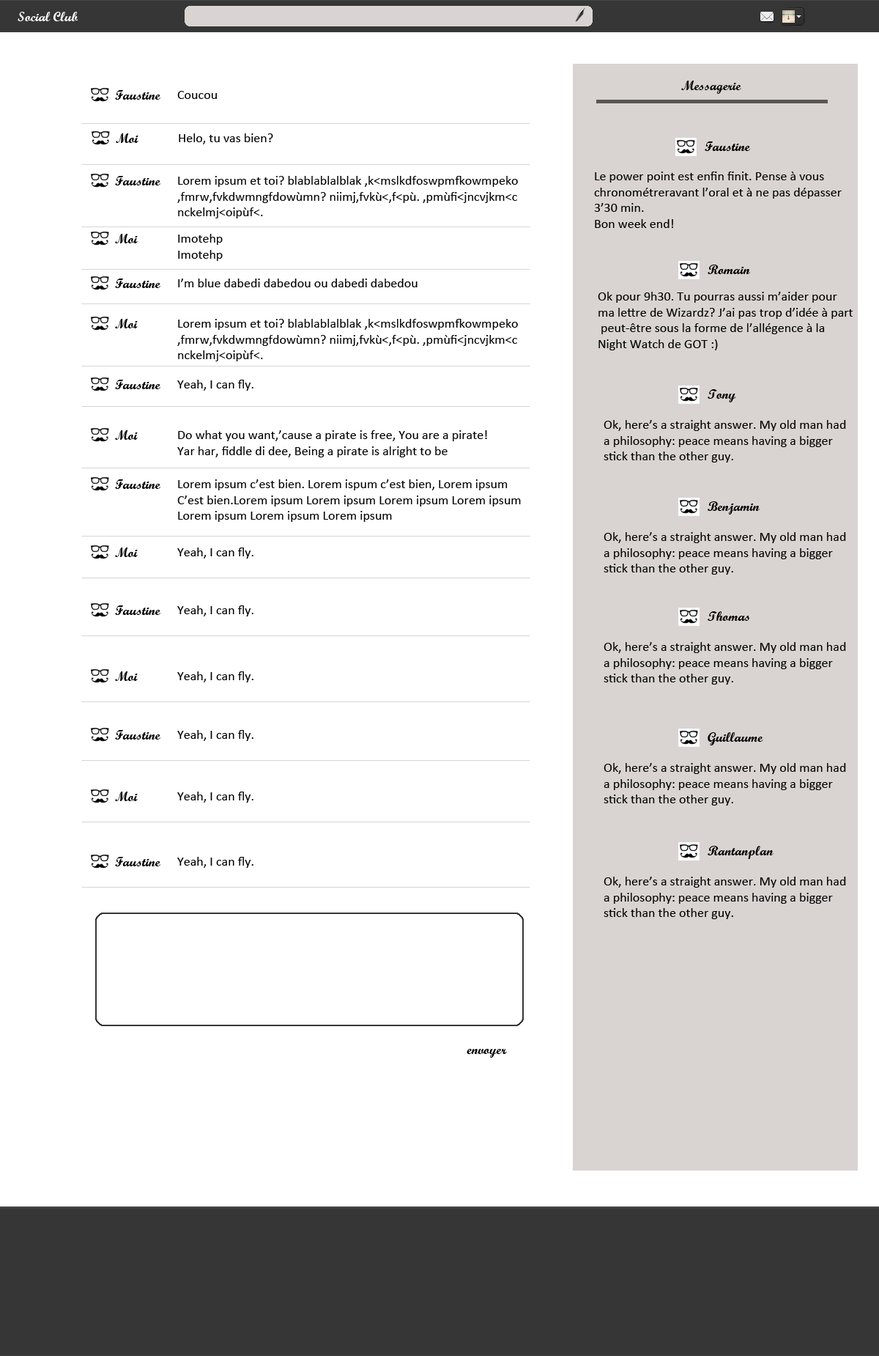
<style>
.page{position:relative;width:879px;height:1356px;background:#ffffff}
.page>*{position:absolute;margin:0}
.t1{font:13.2px "ScriptMTBold";color:#fefefe}
.t2{font:13.2px "ScriptMTBold";color:#070707}
.t3{font:13.2px "ScriptMTBold";color:#010101}
.t4{font:13.2px "Calibri";color:#010101}
</style>
<div class="page">
<p class="t1" style="left:18px;top:12px;width:60px;height:9px">Social Club</p>
<p class="t2" style="left:682px;top:81px;width:60px;height:13px">Messagerie</p>
<p class="t3" style="left:115px;top:90px;width:46px;height:10px">Faustine</p>
<p class="t4" style="left:177px;top:91px;width:40px;height:8px">Coucou</p>
<p class="t3" style="left:116px;top:133px;width:23px;height:10px">Moi</p>
<p class="t4" style="left:179px;top:133px;width:94px;height:11px">Helo, tu vas bien?</p>
<p class="t3" style="left:705px;top:141px;width:45px;height:10px">Faustine</p>
<p class="t4" style="left:594px;top:171px;width:248px;height:57px">Le power point est enfin finit. Pense à vous <br>chronométreravant l’oral et à ne pas dépasser <br>3’30 min.<br>Bon week end!</p>
<p class="t3" style="left:115px;top:176px;width:46px;height:9px">Faustine</p>
<p class="t4" style="left:177px;top:176px;width:341px;height:42px">Lorem ipsum et toi? blablablalblak ,k&lt;mslkdfoswpmfkowmpeko<br>,fmrw,fvkdwmngfdowùmn? niimj,fvkù&lt;,f&lt;pù. ,pmùfi&lt;jncvjkm&lt;c<br>nckelmj&lt;oipùf&lt;.</p>
<p class="t3" style="left:115px;top:234px;width:23px;height:9px">Moi</p>
<p class="t4" style="left:178px;top:234px;width:45px;height:27px">Imotehp <br>Imotehp</p>
<p class="t3" style="left:708px;top:265px;width:42px;height:9px">Romain</p>
<p class="t3" style="left:115px;top:278px;width:46px;height:10px">Faustine</p>
<p class="t4" style="left:178px;top:278px;width:240px;height:9px">I’m blue dabedi dabedou ou dabedi dabedou</p>
<p class="t4" style="left:598px;top:292px;width:255px;height:58px">Ok pour 9h30. Tu pourras aussi m’aider pour <br>ma lettre de Wizardz? J’ai pas trop d’idée à part<br> peut-être sous la forme de l’allégence à la <br>Night Watch de GOT :)</p>
<p class="t3" style="left:115px;top:319px;width:23px;height:9px">Moi</p>
<p class="t4" style="left:177px;top:319px;width:341px;height:42px">Lorem ipsum et toi? blablablalblak ,k&lt;mslkdfoswpmfkowmpeko<br>,fmrw,fvkdwmngfdowùmn? niimj,fvkù&lt;,f&lt;pù. ,pmùfi&lt;jncvjkm&lt;c<br>nckelmj&lt;oipùf&lt;.</p>
<p class="t3" style="left:115px;top:380px;width:46px;height:9px">Faustine</p>
<p class="t4" style="left:177px;top:380px;width:77px;height:11px">Yeah, I can fly.</p>
<p class="t3" style="left:708px;top:389px;width:29px;height:13px">Tony</p>
<p class="t4" style="left:604px;top:420px;width:242px;height:42px">Ok, here’s a straight answer. My old man had <br>a philosophy: peace means having a bigger <br>stick than the other guy.</p>
<p class="t3" style="left:115px;top:430px;width:23px;height:10px">Moi</p>
<p class="t4" style="left:177px;top:430px;width:310px;height:27px">Do what you want,’cause a pirate is free, You are a pirate!<br>Yar har, fiddle di dee, Being a pirate is alright to be</p>
<p class="t3" style="left:115px;top:479px;width:46px;height:10px">Faustine</p>
<p class="t4" style="left:177px;top:479px;width:344px;height:43px">Lorem ipsum c’est bien. Lorem ispum c’est bien, Lorem ipsum<br>C’est bien.Lorem ipsum Lorem ipsum Lorem ipsum Lorem ipsum<br>Lorem ipsum Lorem ipsum Lorem ipsum</p>
<p class="t3" style="left:708px;top:501px;width:52px;height:13px">Benjamin</p>
<p class="t4" style="left:604px;top:532px;width:242px;height:43px">Ok, here’s a straight answer. My old man had <br>a philosophy: peace means having a bigger <br>stick than the other guy.</p>
<p class="t3" style="left:115px;top:547px;width:23px;height:10px">Moi</p>
<p class="t4" style="left:177px;top:547px;width:77px;height:11px">Yeah, I can fly.</p>
<p class="t3" style="left:115px;top:605px;width:46px;height:10px">Faustine</p>
<p class="t4" style="left:177px;top:605px;width:77px;height:11px">Yeah, I can fly.</p>
<p class="t3" style="left:708px;top:611px;width:42px;height:10px">Thomas</p>
<p class="t4" style="left:604px;top:642px;width:242px;height:43px">Ok, here’s a straight answer. My old man had <br>a philosophy: peace means having a bigger <br>stick than the other guy.</p>
<p class="t3" style="left:115px;top:671px;width:23px;height:10px">Moi</p>
<p class="t4" style="left:177px;top:671px;width:77px;height:11px">Yeah, I can fly.</p>
<p class="t3" style="left:115px;top:730px;width:46px;height:9px">Faustine</p>
<p class="t4" style="left:177px;top:730px;width:77px;height:11px">Yeah, I can fly.</p>
<p class="t3" style="left:708px;top:732px;width:56px;height:13px">Guillaume</p>
<p class="t4" style="left:604px;top:763px;width:242px;height:42px">Ok, here’s a straight answer. My old man had <br>a philosophy: peace means having a bigger <br>stick than the other guy.</p>
<p class="t3" style="left:115px;top:792px;width:23px;height:9px">Moi</p>
<p class="t4" style="left:177px;top:792px;width:77px;height:11px">Yeah, I can fly.</p>
<p class="t3" style="left:708px;top:846px;width:66px;height:13px">Rantanplan</p>
<p class="t3" style="left:115px;top:857px;width:46px;height:9px">Faustine</p>
<p class="t4" style="left:177px;top:857px;width:77px;height:11px">Yeah, I can fly.</p>
<p class="t4" style="left:604px;top:877px;width:242px;height:42px">Ok, here’s a straight answer. My old man had <br>a philosophy: peace means having a bigger <br>stick than the other guy.</p>
<p class="t3" style="left:467px;top:1049px;width:40px;height:9px">envoyer</p>
</div>
